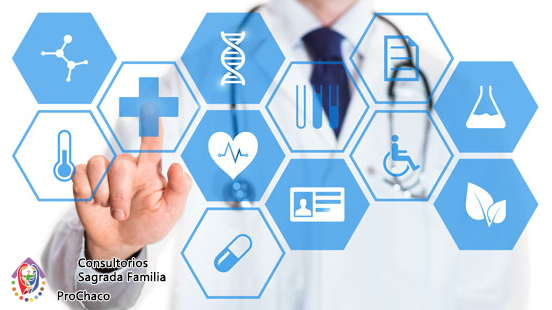
<style>
.page{position:relative;width:552px;height:310px}
.page>*{position:absolute;margin:0}
.t1{font:12px/14px "MyanmarText";color:#000000;font-weight:bold}
.t2{font:12px "MyanmarText";color:#000000;font-weight:bold}
</style>
<div class="page">
<p class="t1" style="left:78px;top:257px;width:88px;height:27px">Consultorios<br>Sagrada Familia</p>
<p class="t2" style="left:57px;top:290px;width:53px;height:11px">ProChaco</p>
</div>
